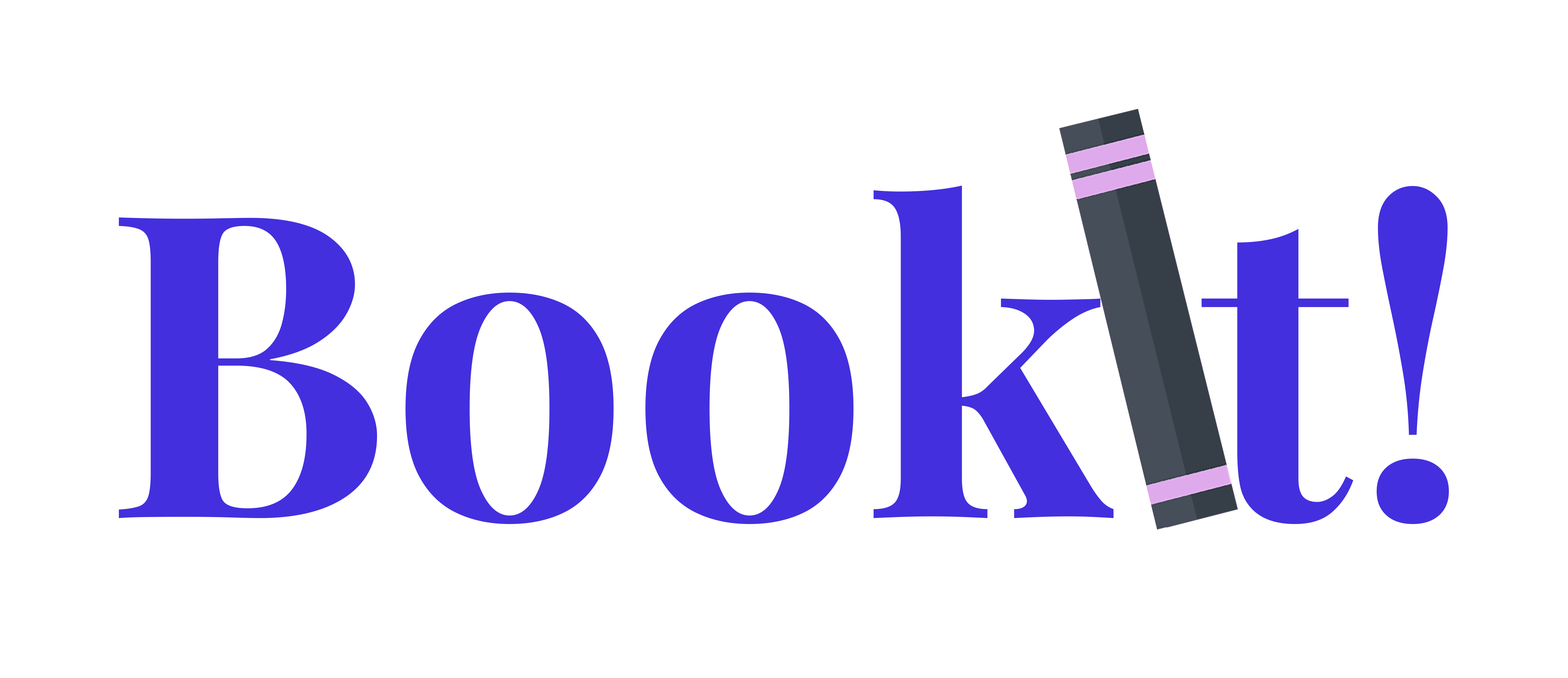
<style>
.page{position:relative;width:1568px;height:678px;background:#ffffff}
.page>*{position:absolute;margin:0}
.t1{font:424.7px "PlayfairDisplay-Bold";color:#432fde}
</style>
<div class="page">
<p class="t1" style="left:119px;top:185px;width:1330px;height:339px">Book t!</p>
</div>
